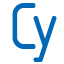
<style>
.page{position:relative;width:64px;height:64px;background:#ffffff}
.page>*{position:absolute;margin:0}
.t1{font:70.8px "ISOCPEUR";color:#0068b7}
</style>
<div class="page">
<p class="t1" style="left:12px;top:3px;width:24px;height:46px">C</p>
<p class="t1" style="left:33px;top:16px;width:24px;height:46px">y</p>
</div>
